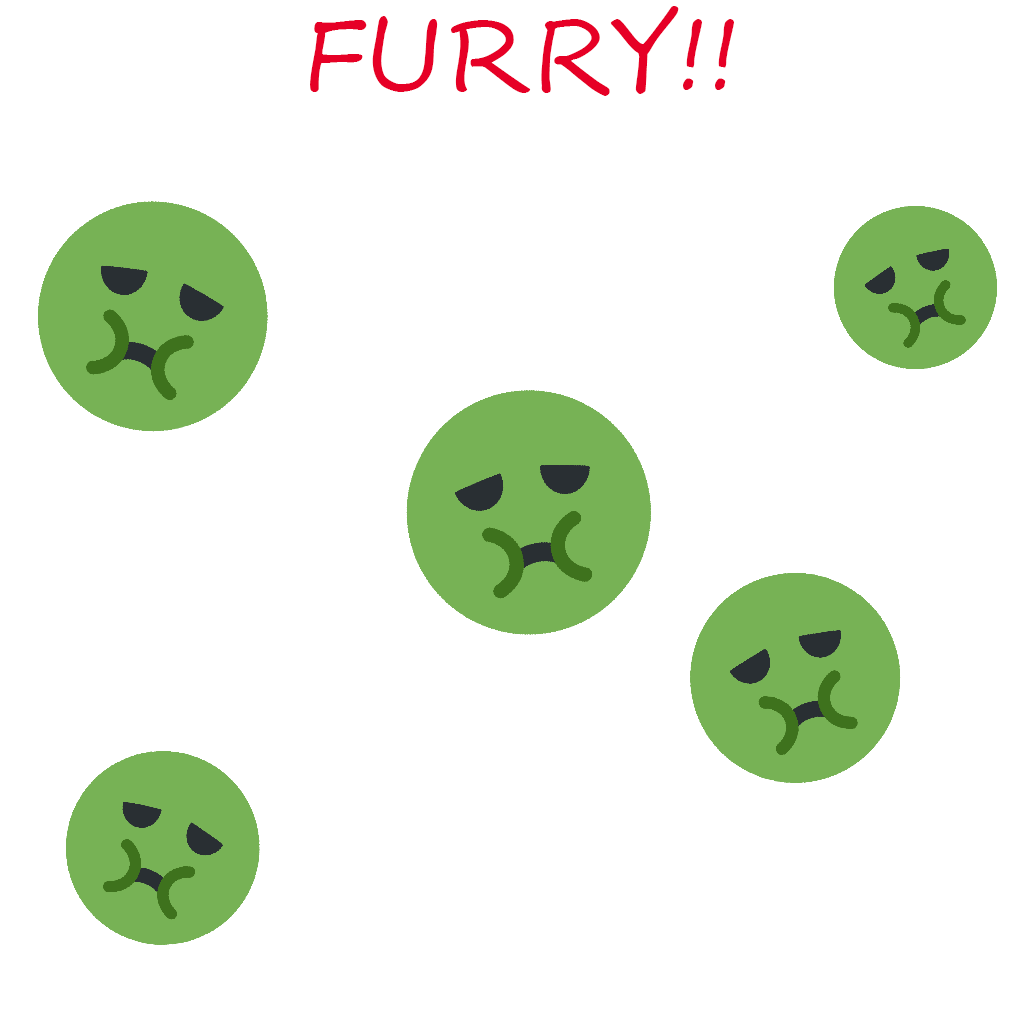
<style>
.page{position:relative;width:1024px;height:1024px;background:#ffffff}
.page>*{position:absolute;margin:0}
.t1{font:100px "SegoeScript";color:#e60026}
</style>
<div class="page">
<p class="t1" style="left:310px;top:6px;width:424px;height:90px">FURRY!!</p>
</div>
